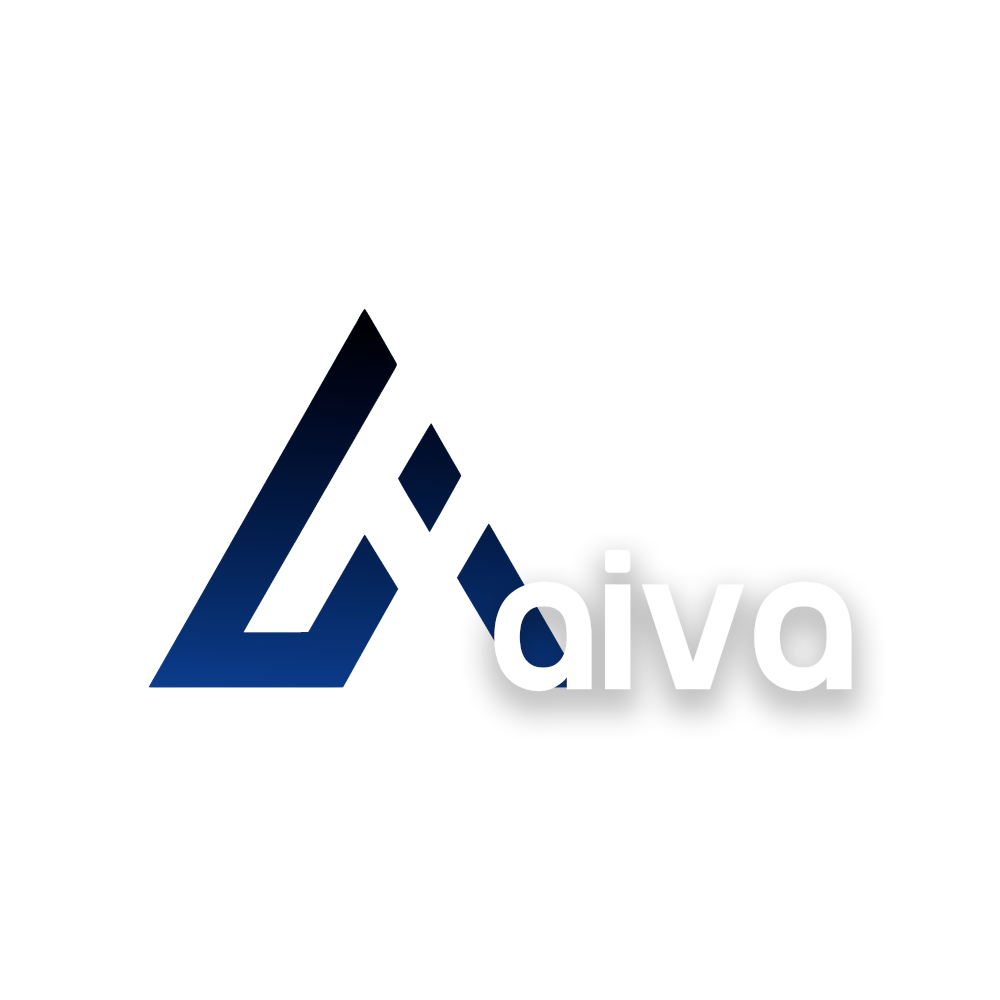
<style>
.page{position:relative;width:1000px;height:1000px;background:#ffffff}
.page>*{position:absolute;margin:0}
.t1{font:206.3px "Run-Medium";color:#ffffff}
</style>
<div class="page">
<p class="t1" style="left:494px;top:549px;width:358px;height:143px">Aiva</p>
</div>
